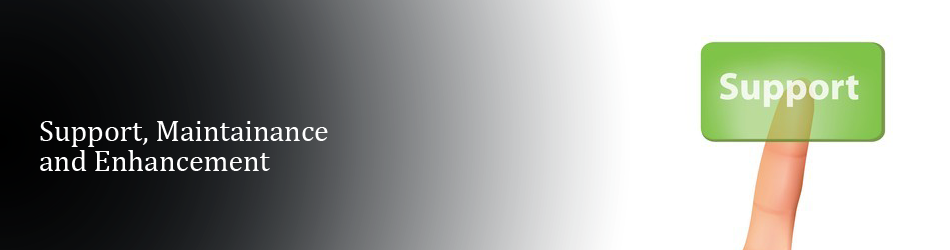
<style>
.page{position:relative;width:950px;height:250px;background:#ffffff}
.page>*{position:absolute;margin:0}
.t1{font:30px/30px "Cambria";color:#ffffff}
</style>
<div class="page">
<p class="t1" style="left:40px;top:121px;width:288px;height:50px">Support, Maintainance <br>and Enhancement</p>
</div>
